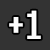
<style>
.page{position:relative;width:50px;height:50px;background:#333333}
.page>*{position:absolute;margin:0}
.t1{font:42px "DeterminationMono";color:#ffffff;scale:0.71 1}
</style>
<div class="page">
<p class="t1" style="left:9px;top:10px;width:32px;height:29px">+1</p>
</div>
